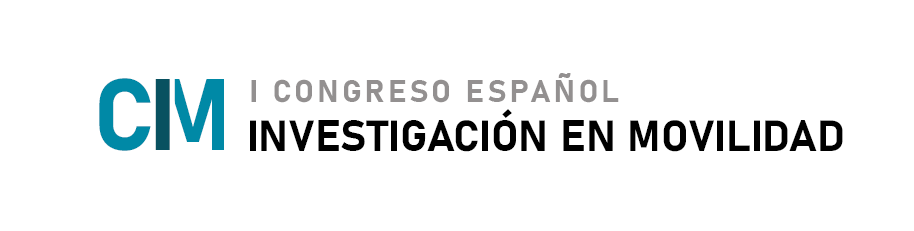
<style>
.page{position:relative;width:914px;height:231px;background:#ffffff}
.page>*{position:absolute;margin:0}
.t1{font:100px "Bahnschrift-Bold";letter-spacing:0.08em;color:#0089a6;text-transform:uppercase}
.t2{font:31px "Bahnschrift-Bold";letter-spacing:0.1em;color:#939090;text-transform:uppercase}
.t3{font:100px "Bahnschrift-Bold";letter-spacing:0.08em;color:#085160;text-transform:uppercase}
.t4{font:43px "Bahnschrift-Bold";color:#000000;text-transform:uppercase}
</style>
<div class="page">
<p class="t1" style="left:99px;top:78px;width:52px;height:73px">C</p>
<p class="t2" style="left:251px;top:73px;width:368px;height:30px">I congreso español</p>
<p class="t3" style="left:155px;top:79px;width:15px;height:71px">I</p>
<p class="t1" style="left:161px;top:79px;width:63px;height:71px">M</p>
<p class="t4" style="left:250px;top:109px;width:593px;height:43px">investigación en movilidad</p>
</div>
